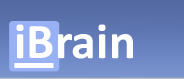
<style>
.page{position:relative;width:184px;height:79px}
.page>*{position:absolute;margin:0}
.t1{font:50.3px "Calibri-Bold";color:#ffffff}
</style>
<div class="page">
<p class="t1" style="left:16px;top:24px;width:117px;height:35px">iBrain</p>
</div>
